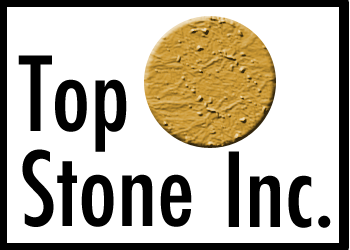
<style>
.page{position:relative;width:350px;height:250px;background:#ffffff}
.page>*{position:absolute;margin:0}
.t1{font:100px "Futura-CondensedMedium";color:#000000}
</style>
<div class="page">
<p class="t1" style="left:18px;top:55px;width:109px;height:97px">Top</p>
<p class="t1" style="left:22px;top:149px;width:170px;height:78px">Stone</p>
<p class="t1" style="left:228px;top:151px;width:103px;height:77px">Inc.</p>
</div>
